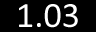
<style>
.page{position:relative;width:96px;height:32px;background:#000000}
.page>*{position:absolute;margin:0}
.t1{font:36px "Calibri";color:#ffffff}
</style>
<div class="page">
<p class="t1" style="left:19px;top:4px;width:59px;height:24px">1.03</p>
</div>
